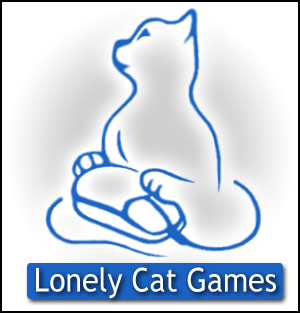
<style>
.page{position:relative;width:300px;height:313px;background:#ffffff}
.page>*{position:absolute;margin:0}
.t1{font:33.1px "TrebuchetMS";color:#ffffff;scale:0.92 1}
</style>
<div class="page">
<p class="t1" style="left:36px;top:267px;width:240px;height:32px">Lonely Cat Games</p>
</div>
